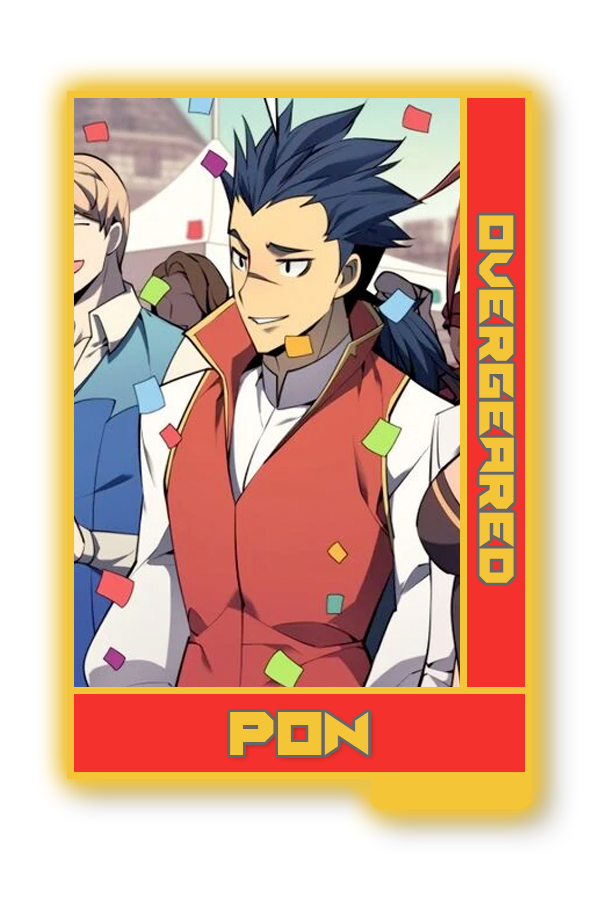
<style>
.page{position:relative;width:600px;height:900px;background:#ffffff}
.page>*{position:absolute;margin:0}
.t1{font:48.8px "Suggested-Regular";color:#f4c536}
.t2{font:62.5px "Suggested-Regular";color:#f4c536}
</style>
<div class="page">
<p class="t1" style="left:479px;top:215px;width:35px;height:368px;rotate:90deg">OVERGEARED</p>
<p class="t2" style="left:230px;top:712px;width:139px;height:43px">Pon</p>
</div>
